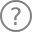
<style>
.page{position:relative;width:32px;height:32px;background:#ffffff}
.page>*{position:absolute;margin:0}
.t1{font:24px "DejaVuSans";color:#808080}
</style>
<div class="page">
<p class="t1" style="left:11px;top:7px;width:10px;height:18px">?</p>
</div>
